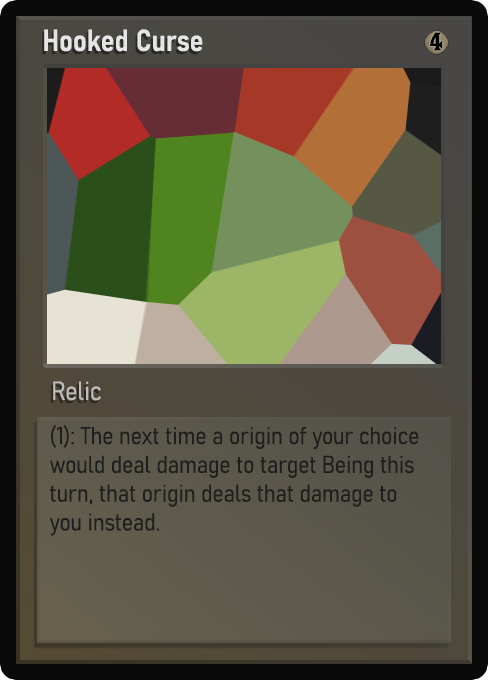
<style>
.page{position:relative;width:488px;height:680px}
.page>*{position:absolute;margin:0}
.t1{font:30px "Bahnschrift-SemiBoldSemiCondensed";color:#f2f2f2;font-weight:bold}
.t2{font:25px "WTRRoycroft";color:#000000;font-weight:bold;scale:1.09 1}
.t3{font:26px "Bahnschrift-LightSemiCondensed";color:#c8c8c8;font-weight:bold}
.t4{font:24px "Bahnschrift-LightSemiCondensed";color:#1e1e1e;font-weight:bold}
</style>
<div class="page">
<p class="t1" style="left:44px;top:29px;width:159px;height:23px;opacity:0.9">Hooked Curse</p>
<p class="t2" style="left:430px;top:32px;width:13px;height:19px">4</p>
<p class="t3" style="left:53px;top:381px;width:48px;height:20px;opacity:0.9">Relic</p>
<p class="t4" style="left:50px;top:425px;width:369px;height:111px">(1): The next time a origin of your choice would deal damage to target Being this turn, that origin deals that damage to you instead.</p>
</div>
